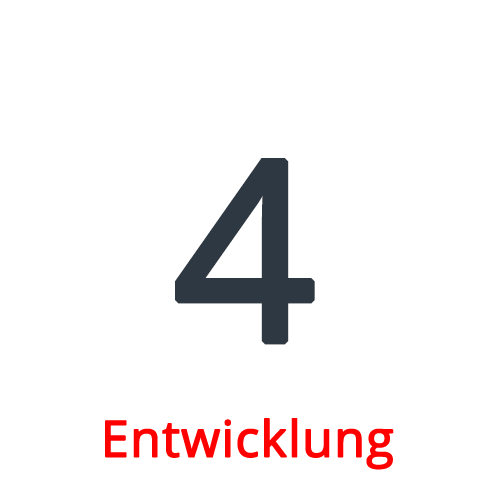
<style>
.page{position:relative;width:500px;height:500px;background:#ffffff}
.page>*{position:absolute;margin:0}
.t1{font:250px "OpenSans-Regular";color:#2e3842;font-weight:bold}
.t2{font:50px "OpenSans-Regular";color:#ff0000;font-weight:bold}
</style>
<div class="page">
<p class="t1" style="left:175px;top:158px;width:140px;height:187px">4</p>
<p class="t2" style="left:105px;top:418px;width:289px;height:52px">Entwicklung</p>
</div>
